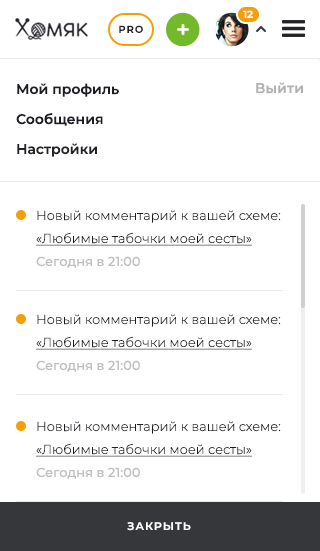
<style>
.page{position:relative;width:320px;height:551px;background:#ffffff}
.page>*{position:absolute;margin:0}
.t1{font:10px "Montserrat-SemiBold";color:#ffffff}
.t2{font:10px "Montserrat-SemiBold";letter-spacing:0.1em;color:#222328;text-transform:uppercase}
.t3{font:14px/30px "Montserrat-SemiBold";color:#1c1e23}
.t4{font:14px/30px "Montserrat-SemiBold";color:#222328}
.t5{font:14px "Montserrat-SemiBold";color:#b0b1b2}
.t6{font:13px/23px "Montserrat-Light";color:#1c1e23}
.t7{font:13px/23px "Montserrat-Light";color:#1c1e23;text-decoration:underline}
.t8{font:13px/23px "Montserrat-Medium";color:#c0c0c0}
.t9{font:11px "Montserrat-SemiBold";letter-spacing:0.1em;color:#ffffff;text-transform:uppercase}
</style>
<div class="page">
<p class="t1" style="left:243px;top:10px;width:10px;height:8px">12</p>
<p class="t2" style="left:119px;top:25px;width:24px;height:8px">pro</p>
<p class="t3" style="left:16px;top:83px;width:103px;height:74px">Мой профиль<br>Сообщения<br><span class="t4">Настройки</span></p>
<p class="t5" style="left:256px;top:82px;width:47px;height:12px">Выйти</p>
<p class="t6" style="left:36px;top:210px;width:245px;height:58px">Новый комментарий к вашей схеме: <br><span class="t7">«Любимые табочки моей сесты» <br></span><span class="t8">Сегодня в 21:00</span></p>
<p class="t6" style="left:36px;top:314px;width:245px;height:58px">Новый комментарий к вашей схеме: <br><span class="t7">«Любимые табочки моей сесты» <br></span><span class="t8">Сегодня в 21:00</span></p>
<p class="t6" style="left:36px;top:421px;width:245px;height:58px">Новый комментарий к вашей схеме: <br><span class="t7">«Любимые табочки моей сесты» <br></span><span class="t8">Сегодня в 21:00</span></p>
<p class="t9" style="left:127px;top:522px;width:64px;height:9px">Закрыть</p>
</div>
